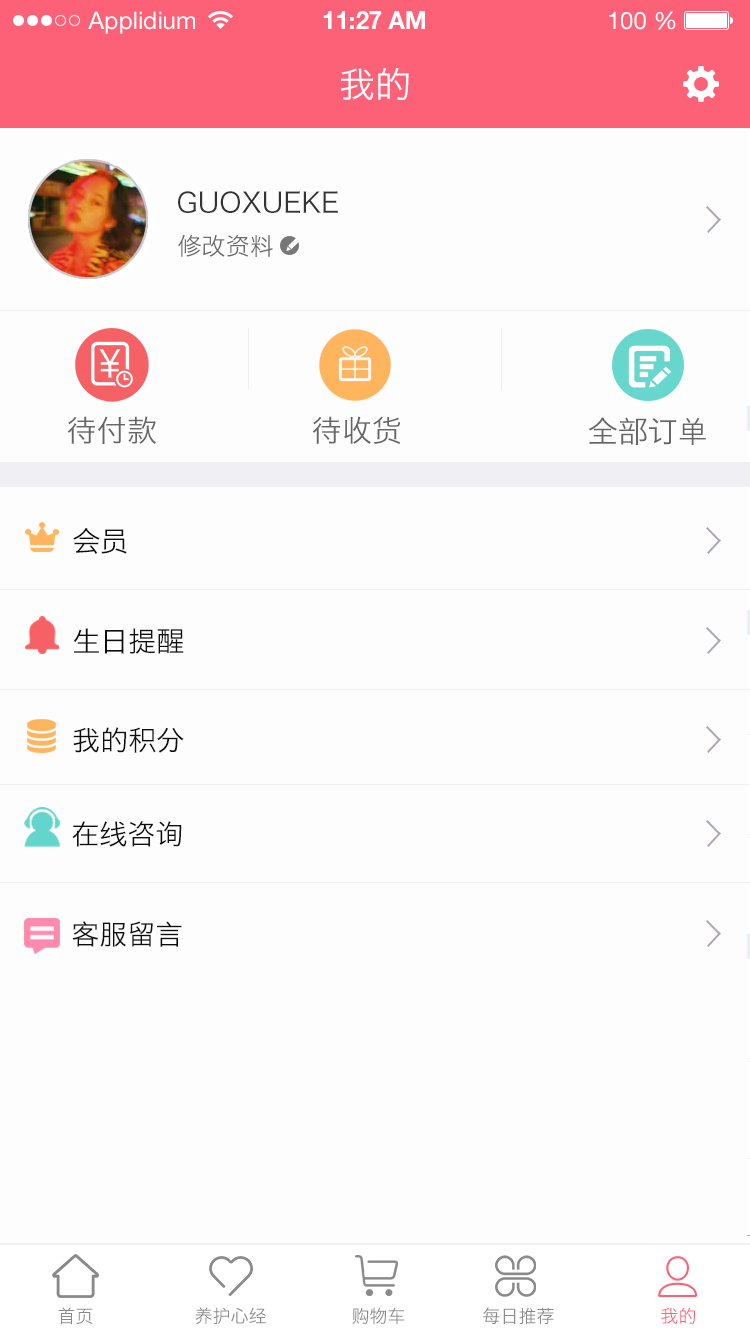
<style>
.page{position:relative;width:750px;height:1334px;background:#fefdfd}
.page>*{position:absolute;margin:0}
.t1{font:24px "HelveticaNeueLTStd-Roman";color:#ffffff}
.t2{font:24px "HelveticaNeueLTStd-Bd";color:#ffffff}
.t3{font:36px "HiraginoSansGB-W3";color:#ffffff}
.t4{font:28px "HiraginoSansGB-W3";color:#333333}
.t5{font:24px "HiraginoSansGB-W3";color:#6a6a6a}
.t6{font:30px "HiraginoSansGB-W3";color:#666666}
.t7{font:28px "HiraginoSansGB-W3";color:#0e0e0e}
.t8{font:18px "HiraginoSansGB-W3";color:#8a8a8a}
.t9{font:18px "HiraginoSansGB-W3";color:#fc6177}
</style>
<div class="page">
<p class="t1" style="left:88px;top:11px;width:107px;height:23px">Applidium</p>
<p class="t2" style="left:323px;top:11px;width:102px;height:18px">11:27 AM</p>
<p class="t1" style="left:609px;top:11px;width:67px;height:19px">100 %</p>
<p class="t3" style="left:341px;top:68px;width:68px;height:32px">我的</p>
<p class="t4" style="left:178px;top:191px;width:160px;height:22px">GUOXUEKE</p>
<p class="t5" style="left:178px;top:234px;width:95px;height:23px">修改资料</p>
<p class="t6" style="left:67px;top:416px;width:89px;height:28px">待付款</p>
<p class="t6" style="left:312px;top:416px;width:89px;height:28px">待收货</p>
<p class="t6" style="left:588px;top:417px;width:118px;height:28px">全部订单</p>
<p class="t7" style="left:73px;top:527px;width:54px;height:27px">会员</p>
<p class="t7" style="left:73px;top:628px;width:111px;height:26px">生日提醒</p>
<p class="t7" style="left:73px;top:727px;width:111px;height:26px">我的积分</p>
<p class="t7" style="left:72px;top:821px;width:110px;height:26px">在线咨询</p>
<p class="t7" style="left:72px;top:921px;width:110px;height:26px">客服留言</p>
<p class="t8" style="left:58px;top:1307px;width:35px;height:18px">首页</p>
<p class="t8" style="left:195px;top:1307px;width:71px;height:17px">养护心经</p>
<p class="t8" style="left:352px;top:1307px;width:53px;height:18px">购物车</p>
<p class="t8" style="left:483px;top:1307px;width:71px;height:18px">每日推荐</p>
<p class="t9" style="left:661px;top:1307px;width:35px;height:17px">我的</p>
</div>
